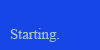
<style>
.page{position:relative;width:100px;height:50px;background:#1646e5}
.page>*{position:absolute;margin:0}
.t1{font:14.6px "TimesNewRomanPSMT";color:#a2bfc6}
</style>
<div class="page">
<p class="t1" style="left:10px;top:28px;width:49px;height:14px">Starting.</p>
</div>
